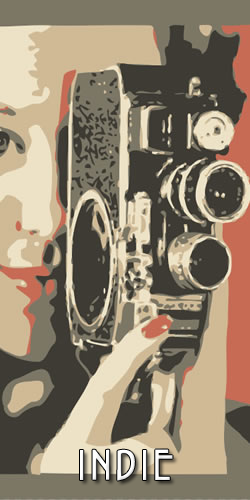
<style>
.page{position:relative;width:250px;height:500px}
.page>*{position:absolute;margin:0}
.t1{font:38.9px "HillHouse";letter-spacing:0.04em;color:#ffffff}
</style>
<div class="page">
<p class="t1" style="left:80px;top:449px;width:93px;height:32px">Indie</p>
</div>
